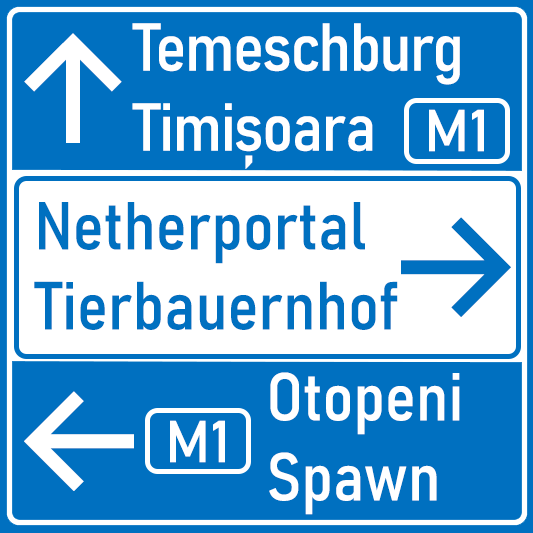
<style>
.page{position:relative;width:533px;height:533px;background:#0070c0}
.page>*{position:absolute;margin:0}
.t1{font:66.7px "Bahnschrift-SemiCondensed";letter-spacing:-0.02em;color:#ffffff}
.t2{font:150px "Inter-Medium";color:#ffffff}
.t3{font:58.3px "Bahnschrift";color:#ffffff}
.t4{font:66.7px "Bahnschrift-SemiCondensed";color:#0070c0}
.t5{font:150px "Inter-Medium";color:#0070c0}
.t6{font:66.7px "Bahnschrift-SemiCondensed";color:#ffffff}
</style>
<div class="page">
<p class="t1" style="left:132px;top:23px;width:328px;height:146px">Temeschburg<br>Timișoara</p>
<p class="t2" style="left:24px;top:33px;width:98px;height:110px">↑</p>
<p class="t3" style="left:429px;top:109px;width:55px;height:43px">M1</p>
<p class="t4" style="left:34px;top:202px;width:364px;height:128px">Netherportal<br>Tierbauernhof</p>
<p class="t5" style="left:401px;top:217px;width:110px;height:100px">→</p>
<p class="t6" style="left:269px;top:372px;width:191px;height:143px">Otopeni<br>Spawn</p>
<p class="t2" style="left:24px;top:391px;width:110px;height:100px">←</p>
<p class="t3" style="left:170px;top:420px;width:55px;height:43px">M1</p>
</div>
